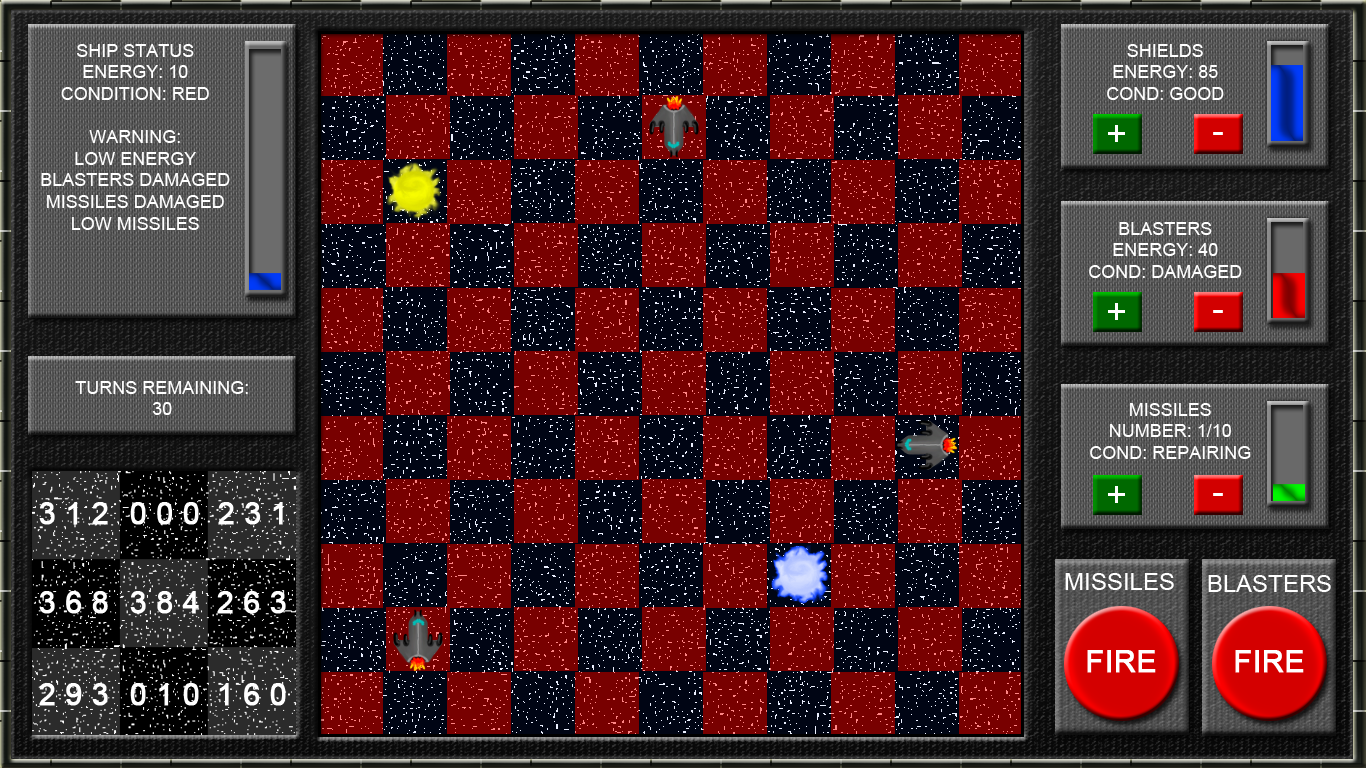
<style>
.page{position:relative;width:1366px;height:768px;background:#780000}
.page>*{position:absolute;margin:0}
.t1{font:18px "ArialMT";color:#ffffff}
.t2{font:24px "ArialMT";color:#ffffff}
.t3{font:30px "ArialMT";color:#ffffff;font-weight:bold}
</style>
<div class="page">
<p class="t1" style="left:41px;top:44px;width:189px;height:186px;text-align:center">SHIP STATUS<br>ENERGY: 10<br>CONDITION: RED<br><br>WARNING:<br>LOW ENERGY<br>BLASTERS DAMAGED<br>MISSILES DAMAGED<br>LOW MISSILES</p>
<p class="t1" style="left:1107px;top:44px;width:117px;height:56px;text-align:center">SHIELDS<br>ENERGY: 85<br>COND: GOOD</p>
<p class="t1" style="left:1089px;top:222px;width:153px;height:56px;text-align:center">BLASTERS<br>ENERGY: 40<br>COND: DAMAGED</p>
<p class="t1" style="left:75px;top:381px;width:173px;height:34px;text-align:center">TURNS REMAINING:<br>30</p>
<p class="t1" style="left:1090px;top:403px;width:161px;height:56px;text-align:center">MISSILES<br>NUMBER: 1/10<br>COND: REPAIRING</p>
<p class="t2" style="left:1065px;top:573px;width:109px;height:17px">MISSILES</p>
<p class="t2" style="left:1208px;top:575px;width:123px;height:17px">BLASTERS</p>
<p class="t3" style="left:1087px;top:650px;width:69px;height:23px">FIRE</p>
<p class="t3" style="left:1235px;top:650px;width:69px;height:23px">FIRE</p>
</div>
